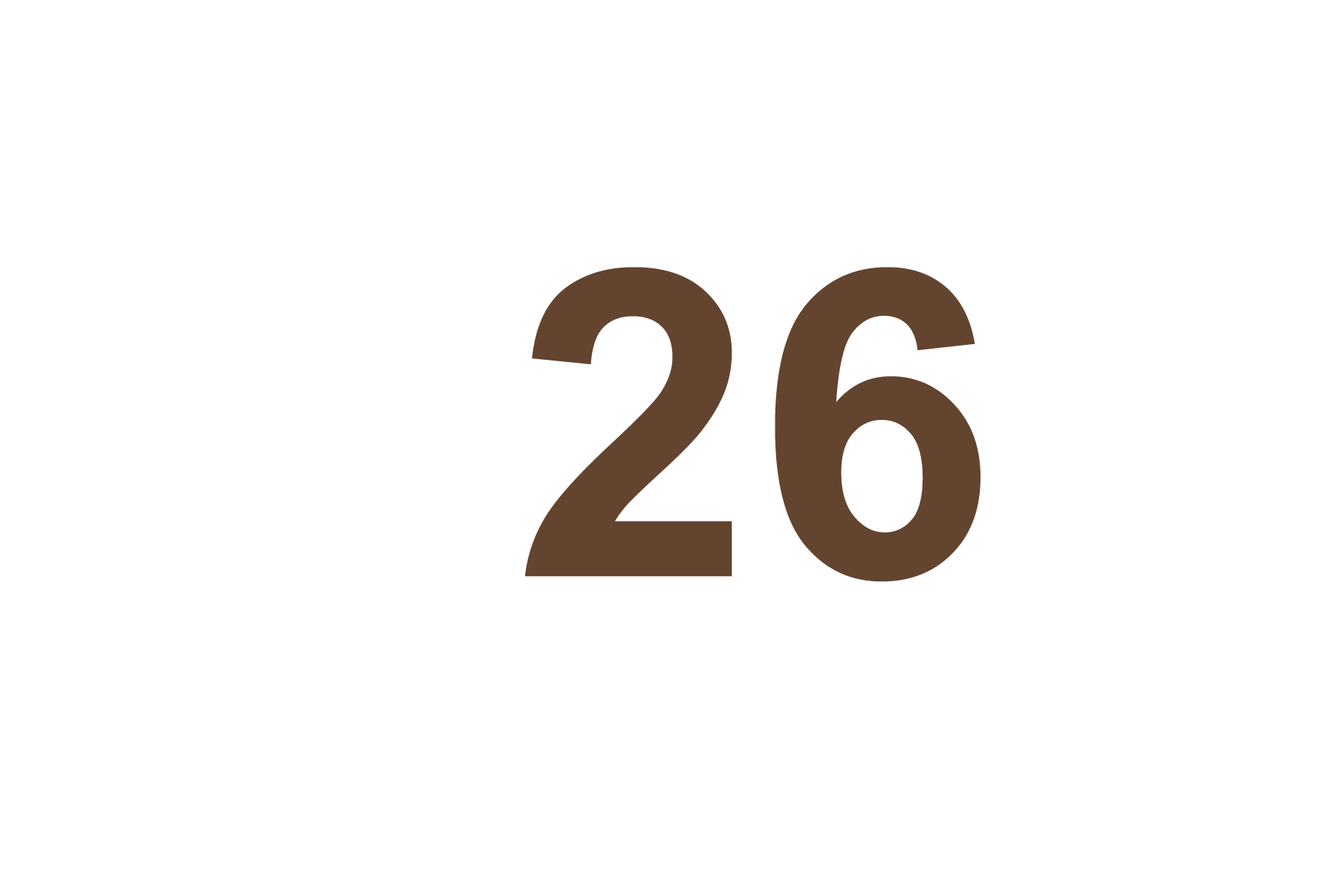
<style>
.page{position:relative;width:1337px;height:892px;background:#ffffff}
.page>*{position:absolute;margin:0}
.t1{font:429.6px "Arial-BoldMT";color:#63442f}
</style>
<div class="page">
<p class="t1" style="left:525px;top:267px;width:456px;height:315px">26</p>
</div>
